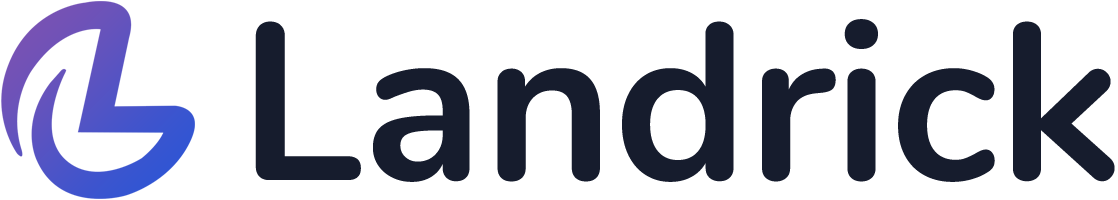
<style>
.page{position:relative;width:1118px;height:200px;background:#ffffff}
.page>*{position:absolute;margin:0}
.t1{font:223px "Nunito-Bold";color:#161c2d}
</style>
<div class="page">
<p class="t1" style="left:255px;top:19px;width:860px;height:163px">Landrick</p>
</div>
